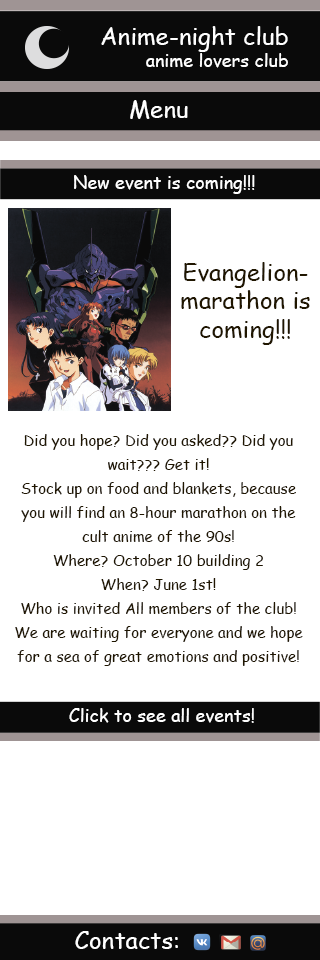
<style>
.page{position:relative;width:320px;height:960px;background:#ffffff}
.page>*{position:absolute;margin:0}
.t1{font:24px "ComicSansMS";color:#ffffff}
.t2{font:18px "ComicSansMS";color:#ffffff}
.t3{font:24px "ComicSansMS";color:#201600}
.t4{font:15px/24px "ComicSansMS";color:#201600}
</style>
<div class="page">
<p class="t1" style="left:101px;top:26px;width:187px;height:26px">Anime-night club</p>
<p class="t2" style="left:146px;top:53px;width:142px;height:15px">anime lovers club</p>
<p class="t1" style="left:130px;top:100px;width:58px;height:19px">Menu</p>
<p class="t2" style="left:74px;top:175px;width:181px;height:19px">New event is coming!!!</p>
<p class="t3" style="left:181px;top:262px;width:129px;height:83px;text-align:center">Evangelion-<br>marathon is coming!!!</p>
<p class="t4" style="left:15px;top:434px;width:288px;height:232px;text-align:center">Did you hope? Did you asked?? Did you wait??? Get it!<br>Stock up on food and blankets, because you will find an 8-hour marathon on the cult anime of the 90s!<br>Where? October 10 building 2<br>When? June 1st!<br>Who is invited All members of the club!<br>We are waiting for everyone and we hope for a sea of ​​great emotions and positive!</p>
<p class="t2" style="left:69px;top:708px;width:185px;height:15px">Click to see all events!</p>
<p class="t1" style="left:75px;top:931px;width:103px;height:18px">Contacts:</p>
</div>
